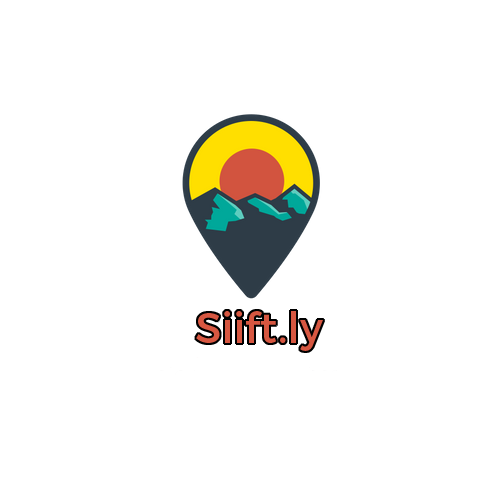
<style>
.page{position:relative;width:500px;height:500px;background:#ffffff}
.page>*{position:absolute;margin:0}
.t1{font:42.7px "Montserrat-Regular";color:#d75741}
</style>
<div class="page">
<p class="t1" style="left:196px;top:311px;width:127px;height:40px">Siift.ly</p>
</div>
